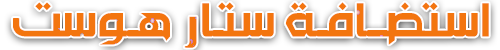
<style>
.page{position:relative;width:500px;height:50px;background:#f3750f}
.page>*{position:absolute;margin:0}
.t1{font:58.8px "AAmine-Bold";color:#f3750f}
</style>
<div class="page">
<p class="t1" style="left:13px;top:2px;width:476px;height:46px">استضــافـة ستـار هـوست</p>
</div>
